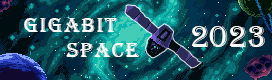
<style>
.page{position:relative;width:272px;height:80px}
.page>*{position:absolute;margin:0}
.t1{font:21px "Algerian";letter-spacing:0.08em;color:#ffffff}
.t2{font:32px "Algerian";color:#ffffff}
</style>
<div class="page">
<p class="t1" style="left:24px;top:18px;width:115px;height:39px">GIGABIT <br>     SPACE</p>
<p class="t2" style="left:191px;top:26px;width:74px;height:21px">2023</p>
</div>
